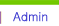
<style>
.page{position:relative;width:59px;height:26px;background:#ffffff}
.page>*{position:absolute;margin:0}
.t1{font:12px "Gulim";color:#3f3cd0}
</style>
<div class="page">
<p class="t1" style="left:13px;top:12px;width:35px;height:10px">Admin</p>
</div>
